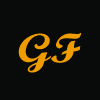
<style>
.page{position:relative;width:100px;height:100px;background:#090a0a}
.page>*{position:absolute;margin:0}
.t1{font:41.4px "ScriptMTBold";color:#ef9c00;scale:1.23 1}
</style>
<div class="page">
<p class="t1" style="left:18px;top:33px;width:64px;height:40px">GF</p>
</div>
